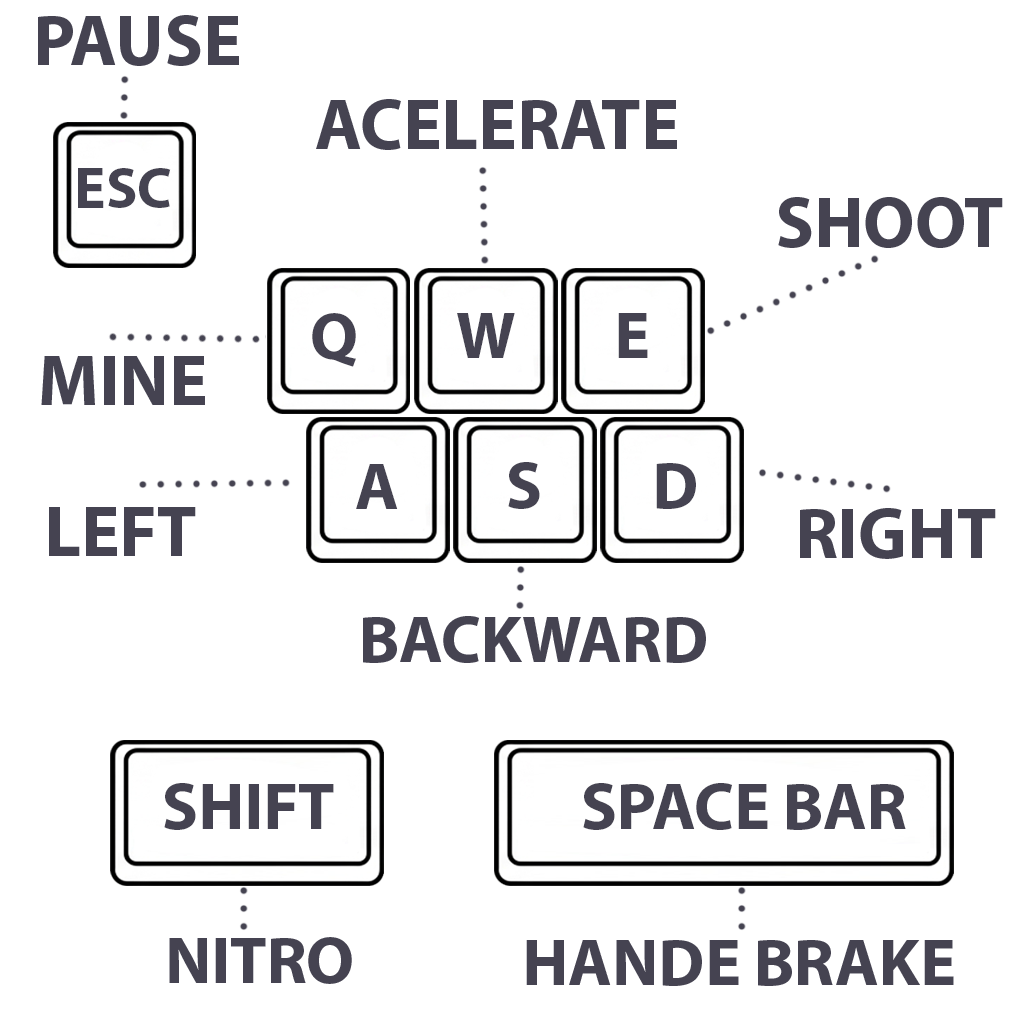
<style>
.page{position:relative;width:1024px;height:1024px;background:#ffffff}
.page>*{position:absolute;margin:0}
.t1{font:72px "MyriadPro-Bold";color:#454351}
.t2{font:58.6px "MyriadPro-Bold";color:#454351}
.t3{font:67px "MyriadPro-Bold";color:#454351}
</style>
<div class="page">
<p class="t1" style="left:38px;top:15px;width:201px;height:51px">PAUSE</p>
<p class="t1" style="left:316px;top:99px;width:361px;height:51px">ACELERATE</p>
<p class="t2" style="left:78px;top:168px;width:93px;height:40px">ESC</p>
<p class="t1" style="left:778px;top:197px;width:225px;height:51px">SHOOT</p>
<p class="t3" style="left:312px;top:313px;width:44px;height:54px">Q</p>
<p class="t3" style="left:457px;top:313px;width:58px;height:45px">W</p>
<p class="t3" style="left:618px;top:313px;width:30px;height:45px">E</p>
<p class="t1" style="left:41px;top:356px;width:164px;height:49px">MINE</p>
<p class="t3" style="left:508px;top:462px;width:32px;height:47px">S</p>
<p class="t3" style="left:356px;top:464px;width:42px;height:45px">A</p>
<p class="t3" style="left:656px;top:463px;width:40px;height:46px">D</p>
<p class="t1" style="left:49px;top:507px;width:147px;height:49px">LEFT</p>
<p class="t1" style="left:800px;top:508px;width:196px;height:51px">RIGHT</p>
<p class="t3" style="left:363px;top:616px;width:343px;height:47px">BACKWARD</p>
<p class="t3" style="left:164px;top:783px;width:170px;height:47px">SHIFT</p>
<p class="t3" style="left:583px;top:783px;width:323px;height:47px">SPACE BAR</p>
<p class="t3" style="left:169px;top:937px;width:183px;height:47px">NITRO</p>
<p class="t3" style="left:526px;top:940px;width:428px;height:46px">HANDE BRAKE</p>
</div>
